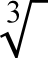
<style>
.page{position:relative;width:48px;height:58px;background:#ffffff}
.page>*{position:absolute;margin:0}
.t1{font:32px "TimesNewRomanPSMT";color:#000000}
</style>
<div class="page">
<p class="t1" style="left:7px;top:0px;width:12px;height:23px">3</p>
</div>
